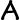
<style>
.page{position:relative;width:20px;height:20px;background:#ffffff}
.page>*{position:absolute;margin:0}
.t1{font:30px "TektonPro-Bold";color:#000000}
</style>
<div class="page">
<p class="t1" style="left:1px;top:0px;width:18px;height:20px">A</p>
</div>
